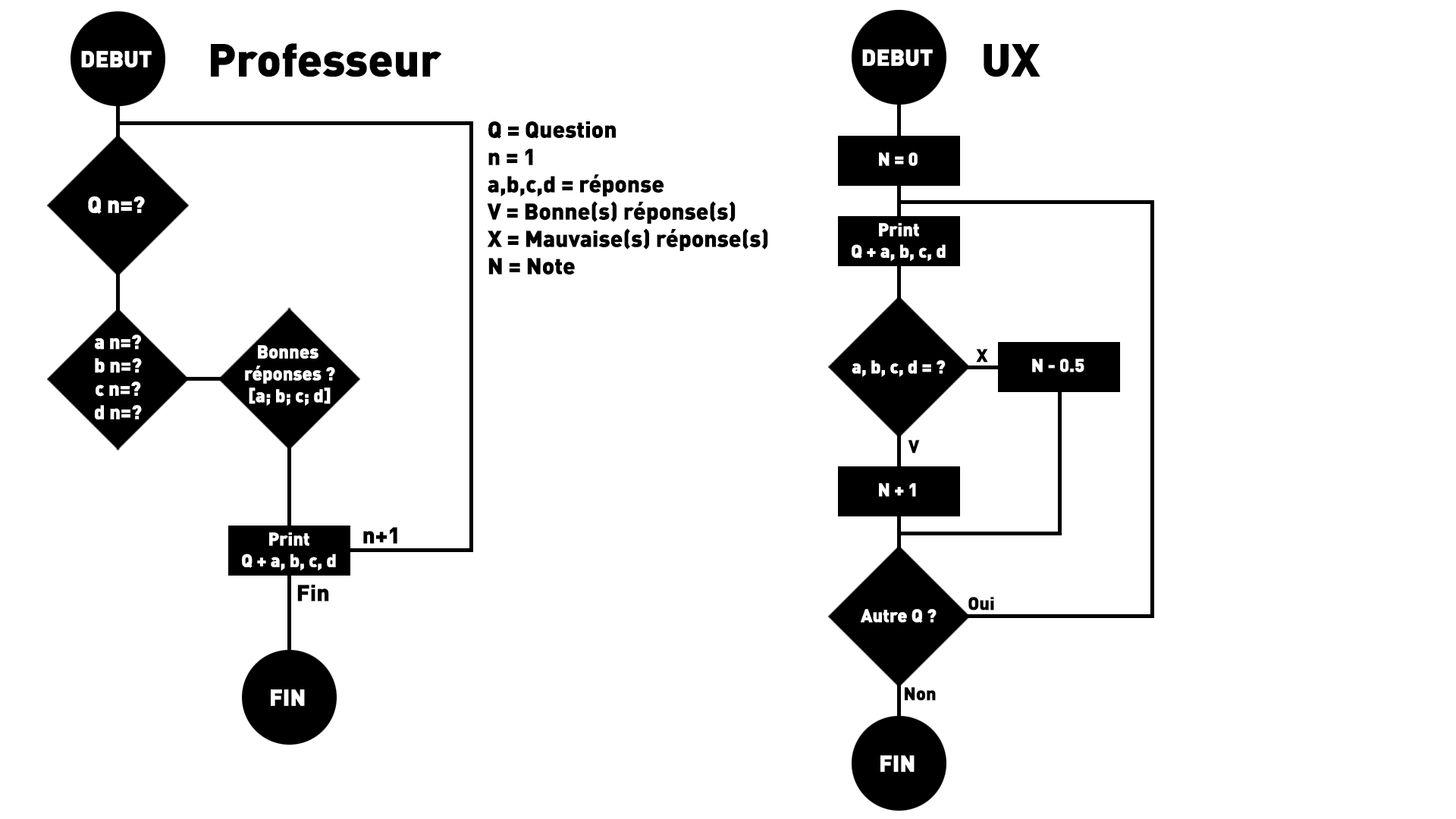
<style>
.page{position:relative;width:1456px;height:819px;background:#ffffff}
.page>*{position:absolute;margin:0}
.t1{font:22.7px "DINPro-Black";color:#ffffff}
.t2{font:45.5px "DINPro-Black";color:#000000}
.t3{font:22.7px "DINPro-Black";color:#000000}
.t4{font:18px "DINPro-Black";color:#ffffff}
.t5{font:19.6px "DINPro-Black";color:#ffffff}
.t6{font:18.3px "DINPro-Black";color:#ffffff}
.t7{font:18px "DINPro-Black";color:#000000}
</style>
<div class="page">
<p class="t1" style="left:81px;top:51px;width:71px;height:16px">DEBUT</p>
<p class="t2" style="left:211px;top:43px;width:231px;height:34px">Professeur</p>
<p class="t1" style="left:862px;top:49px;width:71px;height:17px">DEBUT</p>
<p class="t2" style="left:984px;top:44px;width:56px;height:33px">UX</p>
<p class="t3" style="left:487px;top:121px;width:281px;height:154px">Q = Question<br>n = 1<br>a,b,c,d = réponse<br>V = Bonne(s) réponse(s)<br>X = Mauvaise(s) réponse(s)<br>N = Note</p>
<p class="t4" style="left:879px;top:152px;width:39px;height:14px">N = 0</p>
<p class="t1" style="left:88px;top:196px;width:57px;height:18px">Q n=?</p>
<p class="t4" style="left:852px;top:223px;width:94px;height:39px;text-align:center">Print<br>Q + a, b, c, d</p>
<p class="t5" style="left:95px;top:334px;width:47px;height:86px;text-align:center">a n=?<br>b n=?<br>c n=?<br>d n=?</p>
<p class="t6" style="left:245px;top:345px;width:90px;height:61px;text-align:center">Bonnes <br>réponses ?<br>[a; b; c; d]</p>
<p class="t7" style="left:976px;top:349px;width:12px;height:13px">X</p>
<p class="t4" style="left:852px;top:360px;width:94px;height:17px">a, b, c, d = ?</p>
<p class="t4" style="left:1032px;top:359px;width:52px;height:13px">N - 0.5</p>
<p class="t7" style="left:908px;top:440px;width:12px;height:13px">V</p>
<p class="t4" style="left:879px;top:483px;width:37px;height:14px">N + 1</p>
<p class="t4" style="left:242px;top:532px;width:94px;height:39px;text-align:center">Print<br>Q + a, b, c, d</p>
<p class="t3" style="left:363px;top:527px;width:34px;height:17px">n+1</p>
<p class="t3" style="left:297px;top:585px;width:32px;height:16px">Fin</p>
<p class="t7" style="left:968px;top:597px;width:26px;height:13px">Oui</p>
<p class="t4" style="left:861px;top:609px;width:76px;height:14px">Autre Q ?</p>
<p class="t1" style="left:271px;top:689px;width:34px;height:17px">FIN</p>
<p class="t7" style="left:905px;top:687px;width:31px;height:14px">Non</p>
<p class="t1" style="left:880px;top:755px;width:35px;height:17px">FIN</p>
</div>
